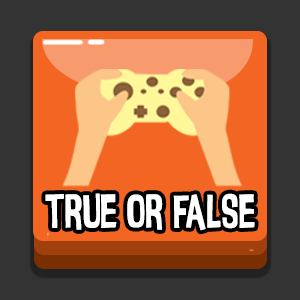
<style>
.page{position:relative;width:300px;height:300px;background:#333333}
.page>*{position:absolute;margin:0}
.t1{font:48.6px "InsideOut";color:#ffffff;scale:0.82 1}
</style>
<div class="page">
<p class="t1" style="left:45px;top:193px;width:210px;height:38px">true or false</p>
</div>
